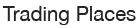
<style>
.page{position:relative;width:140px;height:28px;background:#ffffff}
.page>*{position:absolute;margin:0}
.t1{font:20.3px "HelveticaNeue";color:#242424}
</style>
<div class="page">
<p class="t1" style="left:2px;top:6px;width:134px;height:19px">Trading Places</p>
</div>
